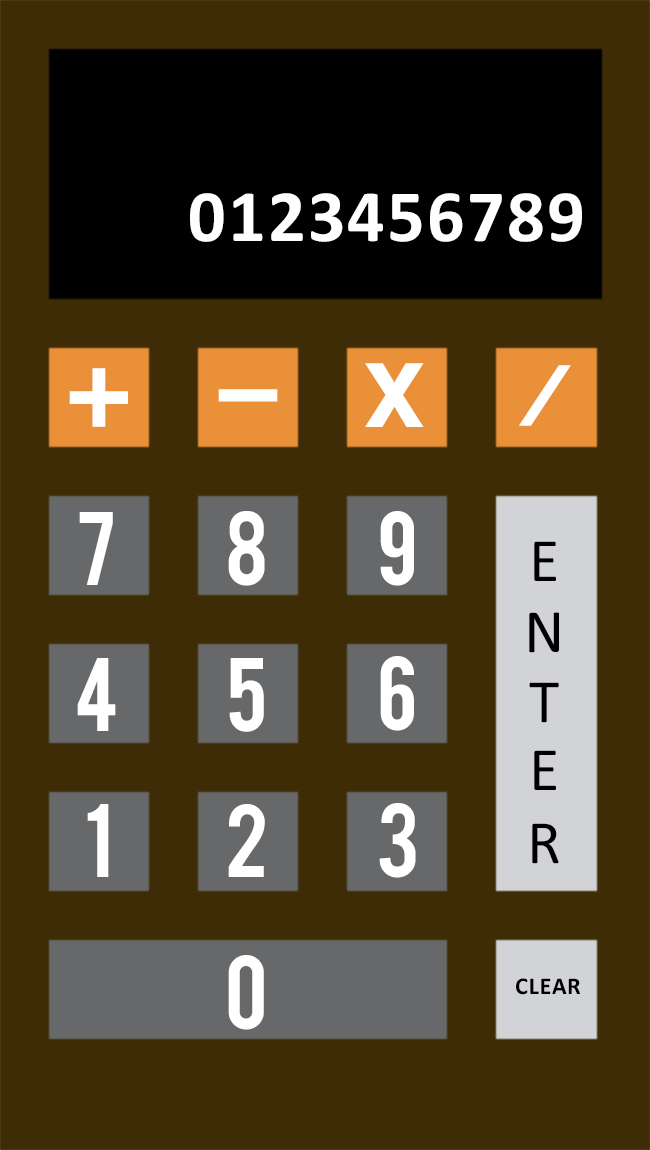
<style>
.page{position:relative;width:650px;height:1150px;background:#3e2c06}
.page>*{position:absolute;margin:0}
.t1{font:74.2px "Calibri-Bold";letter-spacing:0.03em;color:#ffffff}
.t2{font:71.8px "Bebas";letter-spacing:0.05em;color:#ffffff;scale:1.63 1}
.t3{font:61.9px "Bebas";letter-spacing:0.05em;color:#ffffff;scale:1.74 1}
.t4{font:127.6px "Bebas";letter-spacing:0.05em;color:#ffffff}
.t5{font:91.6px "Bebas";letter-spacing:0.05em;color:#ffffff;scale:1.61 1}
.t6{font:82px "Bebas";letter-spacing:0.05em;color:#ffffff}
.t7{font:62.2px "Calibri";letter-spacing:0.03em;color:#000000}
.t8{font:24.2px "Calibri-Bold";letter-spacing:0.03em;color:#000000}
</style>
<div class="page">
<p class="t1" style="left:190px;top:193px;width:392px;height:49px">0123456789</p>
<p class="t2" style="left:365px;top:363px;width:59px;height:64px">x</p>
<p class="t3" style="left:519px;top:365px;width:52px;height:61px">/</p>
<p class="t4" style="left:69px;top:368px;width:59px;height:59px">+</p>
<p class="t5" style="left:218px;top:389px;width:60px;height:13px">-</p>
<p class="t6" style="left:79px;top:512px;width:34px;height:73px">7</p>
<p class="t6" style="left:228px;top:511px;width:37px;height:75px">8</p>
<p class="t6" style="left:380px;top:511px;width:34px;height:75px">9</p>
<p class="t7" style="left:534px;top:541px;width:22px;height:40px">E</p>
<p class="t7" style="left:529px;top:612px;width:30px;height:41px">N</p>
<p class="t6" style="left:77px;top:658px;width:39px;height:73px">4</p>
<p class="t6" style="left:229px;top:658px;width:35px;height:74px">5</p>
<p class="t6" style="left:380px;top:656px;width:34px;height:75px">6</p>
<p class="t7" style="left:529px;top:682px;width:30px;height:41px">T</p>
<p class="t7" style="left:534px;top:750px;width:22px;height:40px">E</p>
<p class="t6" style="left:87px;top:804px;width:22px;height:73px">1</p>
<p class="t6" style="left:228px;top:804px;width:37px;height:73px">2</p>
<p class="t6" style="left:379px;top:803px;width:37px;height:75px">3</p>
<p class="t7" style="left:532px;top:823px;width:27px;height:41px">R</p>
<p class="t6" style="left:228px;top:955px;width:36px;height:75px">0</p>
<p class="t8" style="left:516px;top:978px;width:64px;height:17px">CLEAR</p>
</div>
